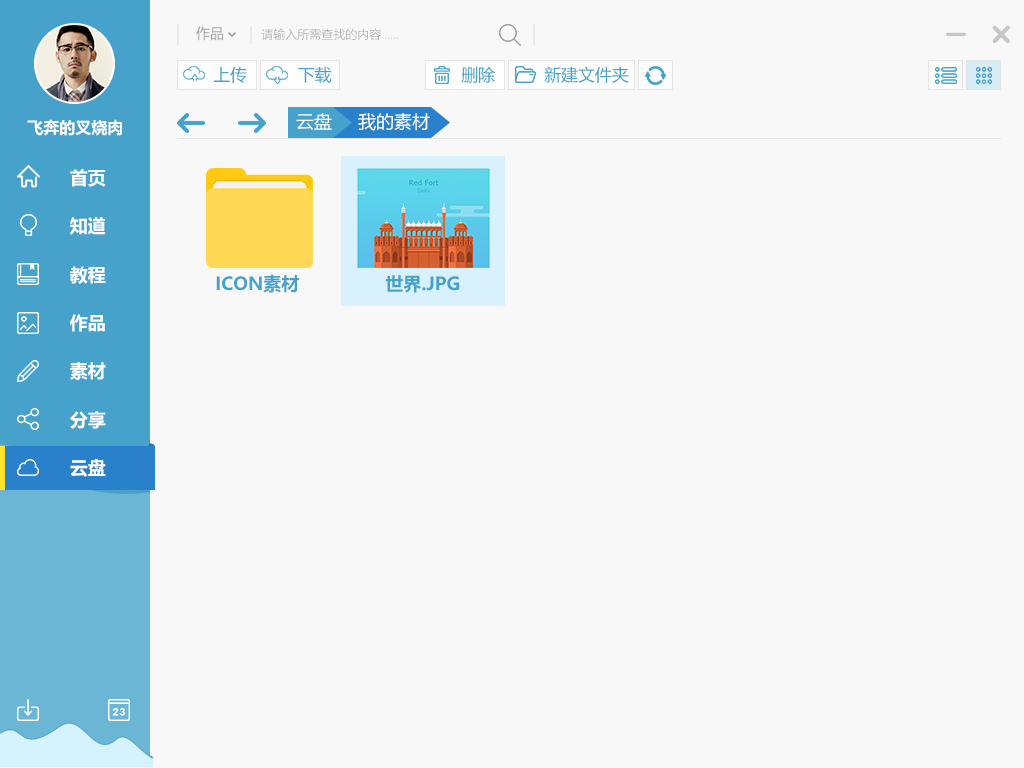
<style>
.page{position:relative;width:1024px;height:768px;background:#f8f8f8}
.page>*{position:absolute;margin:0}
.t1{font:14px "MicrosoftYaHei";color:#a3a3a3}
.t2{font:12px "MicrosoftYaHeiLight";color:#a3a3a3}
.t3{font:17px "MicrosoftYaHei";color:#46a2cb}
.t4{font:18px "MicrosoftYaHei";color:#ffffff}
.t5{font:16px "MicrosoftYaHei-Bold";color:#ffffff}
.t6{font:18px "MicrosoftYaHei-Bold";color:#ffffff}
.t7{font:18px "MicrosoftYaHei-Bold";color:#46a2cb}
</style>
<div class="page">
<p class="t1" style="left:196px;top:26px;width:27px;height:15px">作品</p>
<p class="t2" style="left:261px;top:28px;width:137px;height:12px">请输入所需查找的内容……</p>
<p class="t3" style="left:213px;top:66px;width:34px;height:17px">上传</p>
<p class="t3" style="left:298px;top:66px;width:34px;height:17px">下载</p>
<p class="t3" style="left:461px;top:66px;width:34px;height:17px">删除</p>
<p class="t3" style="left:544px;top:66px;width:85px;height:17px">新建文件夹</p>
<p class="t4" style="left:296px;top:113px;width:36px;height:17px">云盘</p>
<p class="t4" style="left:358px;top:113px;width:72px;height:18px">我的素材</p>
<p class="t5" style="left:27px;top:119px;width:95px;height:17px">飞奔的叉烧肉</p>
<p class="t6" style="left:70px;top:169px;width:36px;height:18px">首页</p>
<p class="t6" style="left:70px;top:217px;width:36px;height:18px">知道</p>
<p class="t6" style="left:70px;top:266px;width:36px;height:18px">教程</p>
<p class="t7" style="left:216px;top:274px;width:83px;height:19px">ICON素材</p>
<p class="t7" style="left:385px;top:275px;width:75px;height:18px">世界.JPG</p>
<p class="t6" style="left:70px;top:314px;width:35px;height:18px">作品</p>
<p class="t6" style="left:70px;top:362px;width:36px;height:18px">素材</p>
<p class="t6" style="left:70px;top:411px;width:36px;height:18px">分享</p>
<p class="t6" style="left:70px;top:459px;width:36px;height:18px">云盘</p>
</div>
